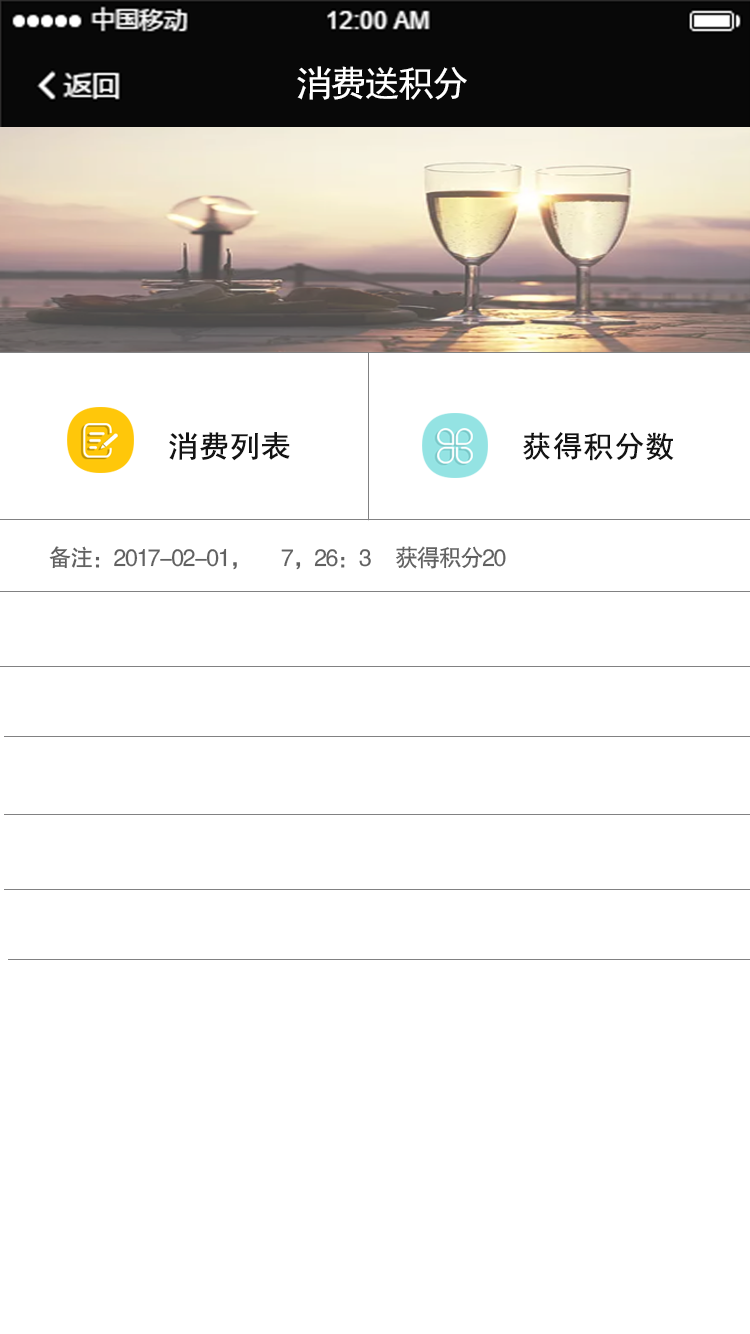
<style>
.page{position:relative;width:750px;height:1334px;background:#ffffff}
.page>*{position:absolute;margin:0}
.t1{font:36px "SimHei";letter-spacing:-0.06em;color:#ffffff}
.t2{font:30px "SimHei";color:#131313;font-weight:bold}
.t3{font:24px "FZHTK--GBK1-0";letter-spacing:-0.06em;color:#616161;scale:0.96 1}
</style>
<div class="page">
<p class="t1" style="left:297px;top:66px;width:170px;height:34px">消费送积分</p>
<p class="t2" style="left:169px;top:432px;width:121px;height:29px">消费列表</p>
<p class="t2" style="left:523px;top:432px;width:151px;height:29px">获得积分数</p>
<p class="t3" style="left:49px;top:546px;width:457px;height:24px">备注：2017-02-01，      7，26：3     获得积分20</p>
</div>
